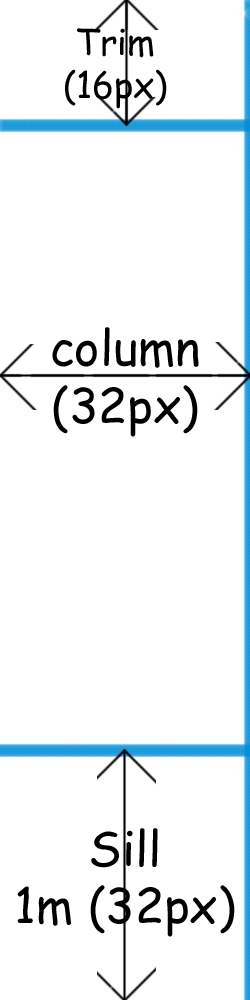
<style>
.page{position:relative;width:250px;height:1000px;background:#ffffff}
.page>*{position:absolute;margin:0}
.t1{font:36px "ComicSansMS";color:#000000}
.t2{font:48px "ComicSansMS";color:#000000}
</style>
<div class="page">
<p class="t1" style="left:65px;top:28px;width:102px;height:81px;text-align:center">Trim <br>(16px)</p>
<p class="t2" style="left:52px;top:327px;width:147px;height:110px;text-align:center">column<br>(32px)</p>
<p class="t2" style="left:17px;top:828px;width:218px;height:109px;text-align:center">Sill<br>1m (32px)</p>
</div>
